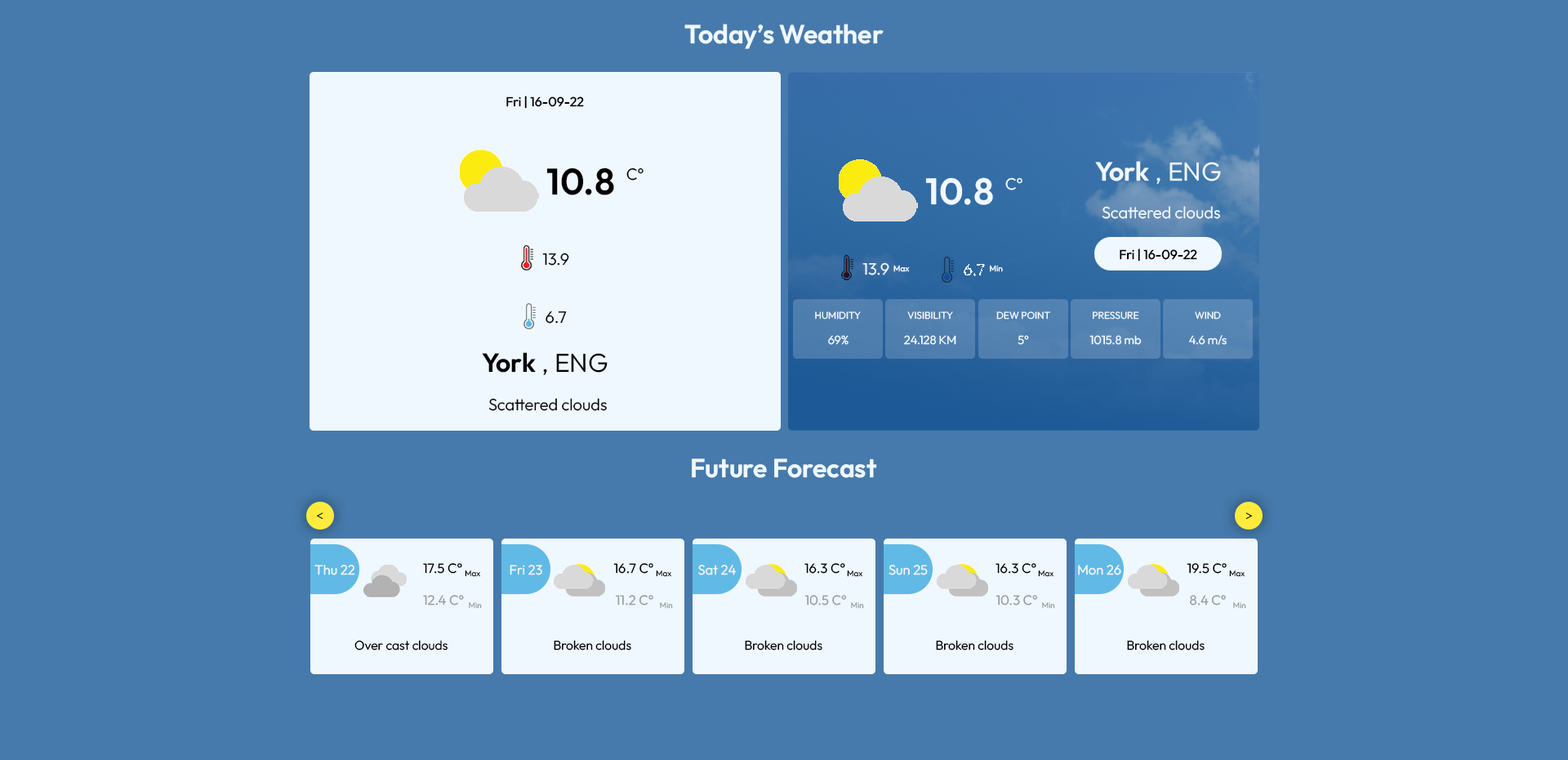
<style>
.page{position:relative;width:1568px;height:760px;background:#467aac}
.page>*{position:absolute;margin:0}
.t1{font:26.1px "Outfit-SemiBold";color:#f0f8ff}
.t2{font:13.1px "Outfit-Regular";color:#000000}
.t3{font:26.1px "Outfit-Light";color:#f0f8ff}
.t4{font:36.8px "Outfit-SemiBold";color:#000000}
.t5{font:16.3px "Outfit-Light";color:#000000}
.t6{font:36.8px "Outfit-SemiBold";color:#f0f8ff}
.t7{font:16.3px "Outfit-Light";color:#f0f8ff}
.t8{font:8.2px "Outfit-Regular";color:#f0f8ff}
.t9{font:9.8px "Outfit-Light";color:#f0f8ff}
.t10{font:11.9px "Outfit-Light";color:#f0f8ff}
.t11{font:26.1px "Outfit-SemiBold";color:#000000}
.t12{font:26.1px "Outfit-Light";color:#000000}
.t13{font:13.5px "Outfit-Light";color:#f6f6f6}
.t14{font:13.5px "Outfit-Light";color:#000000}
.t15{font:8px "Outfit-Light";color:#000000}
.t16{font:13.5px "Outfit-Light";color:#999ea3}
.t17{font:8px "Outfit-Light";color:#999ea3}
.t18{font:12.8px "Outfit-Light";color:#000000}
</style>
<div class="page">
<p class="t1" style="left:684px;top:24px;width:200px;height:25px">Today’s Weather</p>
<p class="t2" style="left:506px;top:96px;width:78px;height:13px">Fri | 16-09-22</p>
<p class="t1" style="left:1095px;top:161px;width:54px;height:20px">York</p>
<p class="t3" style="left:1156px;top:162px;width:65px;height:22px">, ENG</p>
<p class="t4" style="left:546px;top:167px;width:68px;height:28px">10.8</p>
<p class="t5" style="left:626px;top:167px;width:18px;height:13px">C°</p>
<p class="t6" style="left:925px;top:177px;width:68px;height:28px">10.8</p>
<p class="t7" style="left:1005px;top:177px;width:17px;height:13px">C°</p>
<p class="t7" style="left:1102px;top:206px;width:118px;height:13px">Scattered clouds</p>
<p class="t5" style="left:542px;top:252px;width:27px;height:13px">13.9</p>
<p class="t2" style="left:1120px;top:248px;width:77px;height:13px">Fri | 16-09-22</p>
<p class="t7" style="left:862px;top:262px;width:27px;height:13px">13.9</p>
<p class="t8" style="left:893px;top:265px;width:17px;height:7px">Max</p>
<p class="t7" style="left:964px;top:264px;width:21px;height:12px">6.7</p>
<p class="t8" style="left:990px;top:265px;width:13px;height:7px">Min</p>
<p class="t5" style="left:546px;top:311px;width:21px;height:12px">6.7</p>
<p class="t9" style="left:815px;top:311px;width:46px;height:8px">HUMIDITY</p>
<p class="t9" style="left:907px;top:311px;width:46px;height:8px">VISIBILITY</p>
<p class="t9" style="left:996px;top:311px;width:54px;height:8px">DEW POINT</p>
<p class="t9" style="left:1093px;top:311px;width:46px;height:8px">PRESSURE</p>
<p class="t9" style="left:1195px;top:311px;width:26px;height:8px">WIND</p>
<p class="t10" style="left:828px;top:335px;width:21px;height:10px">69%</p>
<p class="t10" style="left:904px;top:335px;width:52px;height:10px">24.128 KM</p>
<p class="t10" style="left:1018px;top:335px;width:11px;height:10px">5°</p>
<p class="t10" style="left:1089px;top:335px;width:53px;height:10px">1015.8 mb</p>
<p class="t10" style="left:1189px;top:335px;width:38px;height:10px">4.6 m/s</p>
<p class="t11" style="left:482px;top:352px;width:54px;height:20px">York</p>
<p class="t12" style="left:543px;top:353px;width:65px;height:22px">, ENG</p>
<p class="t5" style="left:488px;top:398px;width:119px;height:13px">Scattered clouds</p>
<p class="t1" style="left:692px;top:458px;width:185px;height:20px">Future Forecast</p>
<p class="t13" style="left:314px;top:564px;width:41px;height:11px">Thu 22</p>
<p class="t14" style="left:423px;top:563px;width:39px;height:10px">17.5 C°</p>
<p class="t13" style="left:510px;top:564px;width:32px;height:11px">Fri 23</p>
<p class="t14" style="left:613px;top:563px;width:40px;height:10px">16.7 C°</p>
<p class="t13" style="left:698px;top:564px;width:38px;height:11px">Sat 24</p>
<p class="t14" style="left:804px;top:563px;width:41px;height:10px">16.3 C°</p>
<p class="t13" style="left:889px;top:564px;width:39px;height:11px">Sun 25</p>
<p class="t14" style="left:996px;top:563px;width:40px;height:10px">16.3 C°</p>
<p class="t13" style="left:1078px;top:564px;width:43px;height:11px">Mon 26</p>
<p class="t14" style="left:1187px;top:563px;width:40px;height:10px">19.5 C°</p>
<p class="t15" style="left:465px;top:570px;width:16px;height:7px">Max</p>
<p class="t15" style="left:656px;top:570px;width:16px;height:7px">Max</p>
<p class="t15" style="left:847px;top:570px;width:16px;height:7px">Max</p>
<p class="t15" style="left:1038px;top:570px;width:16px;height:7px">Max</p>
<p class="t15" style="left:1229px;top:570px;width:16px;height:7px">Max</p>
<p class="t16" style="left:423px;top:595px;width:41px;height:10px">12.4 C°</p>
<p class="t17" style="left:469px;top:602px;width:13px;height:6px">Min</p>
<p class="t16" style="left:616px;top:595px;width:37px;height:10px">11.2 C°</p>
<p class="t17" style="left:660px;top:602px;width:13px;height:6px">Min</p>
<p class="t16" style="left:804px;top:595px;width:42px;height:10px">10.5 C°</p>
<p class="t17" style="left:851px;top:602px;width:13px;height:6px">Min</p>
<p class="t16" style="left:996px;top:595px;width:41px;height:10px">10.3 C°</p>
<p class="t17" style="left:1042px;top:602px;width:13px;height:6px">Min</p>
<p class="t16" style="left:1190px;top:595px;width:36px;height:10px">8.4 C°</p>
<p class="t17" style="left:1233px;top:602px;width:13px;height:6px">Min</p>
<p class="t18" style="left:354px;top:639px;width:94px;height:11px">Over cast clouds</p>
<p class="t18" style="left:554px;top:639px;width:77px;height:11px">Broken clouds</p>
<p class="t18" style="left:745px;top:639px;width:77px;height:11px">Broken clouds</p>
<p class="t18" style="left:936px;top:639px;width:77px;height:11px">Broken clouds</p>
<p class="t18" style="left:1127px;top:639px;width:78px;height:11px">Broken clouds</p>
</div>
